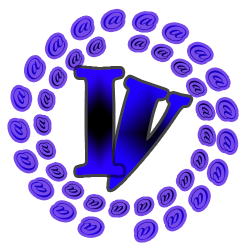
<style>
.page{position:relative;width:250px;height:250px;background:#ffffff}
.page>*{position:absolute;margin:0}
.t1{font:141.8px "GoudyStout";scale:0.42 1}
.t2{font:143.6px "GoudyStout";scale:0.43 1}
</style>
<div class="page">
<p class="t1" style="left:76px;top:68px;width:48px;height:107px">I</p>
<p class="t2" style="left:109px;top:77px;width:82px;height:113px;rotate:19deg">V</p>
</div>
